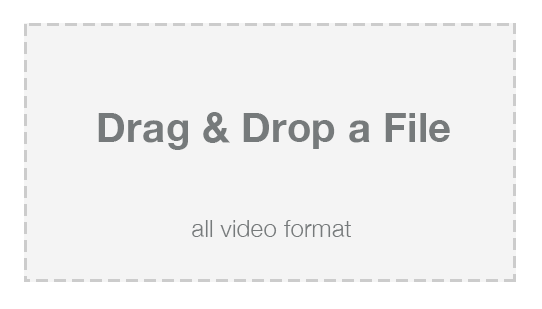
<style>
.page{position:relative;width:542px;height:309px;background:#f4f4f4}
.page>*{position:absolute;margin:0}
.t1{font:40.8px "HelveticaNeue-Bold";letter-spacing:0.01em;color:#767a7b}
.t2{font:24.5px "HelveticaNeue-Light";letter-spacing:0.01em;color:#767a7b}
</style>
<div class="page">
<p class="t1" style="left:98px;top:112px;width:352px;height:38px">Drag &amp; Drop a File</p>
<p class="t2" style="left:192px;top:220px;width:159px;height:17px">all video format</p>
</div>
